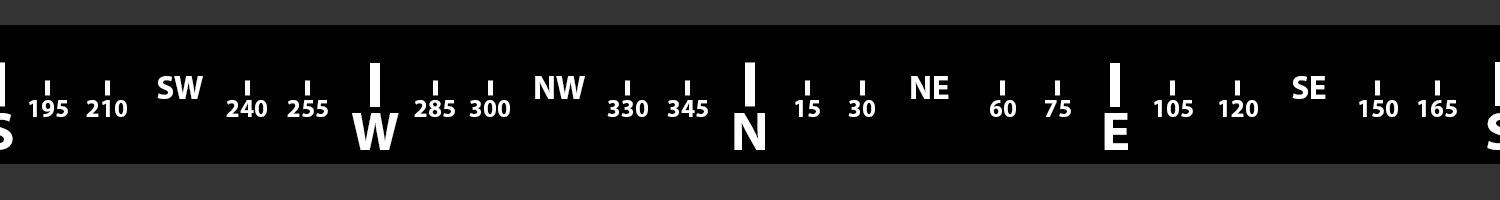
<style>
.page{position:relative;width:1500px;height:200px;background:#000000}
.page>*{position:absolute;margin:0}
.t1{font:33.2px "MyriadPro-Bold";color:#ffffff}
.t2{font:25px "MyriadPro-Bold";color:#ffffff}
.t3{font:54.2px "MyriadPro-Bold";color:#ffffff}
</style>
<div class="page">
<p class="t1" style="left:157px;top:76px;width:46px;height:23px">SW</p>
<p class="t1" style="left:535px;top:76px;width:50px;height:23px">NW</p>
<p class="t1" style="left:911px;top:76px;width:38px;height:23px">NE</p>
<p class="t1" style="left:1292px;top:76px;width:34px;height:23px">SE</p>
<p class="t2" style="left:29px;top:100px;width:39px;height:17px">195</p>
<p class="t2" style="left:86px;top:100px;width:41px;height:17px">210</p>
<p class="t2" style="left:226px;top:100px;width:41px;height:17px">240</p>
<p class="t2" style="left:287px;top:100px;width:41px;height:17px">255</p>
<p class="t2" style="left:414px;top:100px;width:41px;height:17px">285</p>
<p class="t2" style="left:469px;top:100px;width:41px;height:17px">300</p>
<p class="t2" style="left:607px;top:100px;width:41px;height:17px">330</p>
<p class="t2" style="left:667px;top:100px;width:41px;height:17px">345</p>
<p class="t2" style="left:795px;top:100px;width:25px;height:17px">15</p>
<p class="t2" style="left:848px;top:100px;width:27px;height:17px">30</p>
<p class="t2" style="left:990px;top:100px;width:26px;height:17px">60</p>
<p class="t2" style="left:1045px;top:100px;width:26px;height:17px">75</p>
<p class="t2" style="left:1154px;top:100px;width:39px;height:17px">105</p>
<p class="t2" style="left:1219px;top:100px;width:39px;height:17px">120</p>
<p class="t2" style="left:1359px;top:100px;width:39px;height:17px">150</p>
<p class="t2" style="left:1418px;top:100px;width:39px;height:17px">165</p>
<p class="t3" style="left:352px;top:113px;width:47px;height:37px">W</p>
<p class="t3" style="left:734px;top:113px;width:31px;height:37px">N</p>
<p class="t3" style="left:1104px;top:113px;width:24px;height:37px">E</p>
</div>
